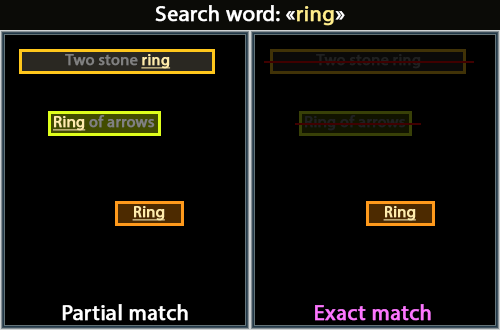
<style>
.page{position:relative;width:500px;height:330px;background:#000000}
.page>*{position:absolute;margin:0}
.t1{font:22px "MyriadPro-Regular";color:#ffffff;font-weight:bold}
.t2{font:22px "MyriadPro-Regular";color:#ffed8b;font-weight:bold}
.t3{font:16px "MyriadPro-Regular";color:#808080;font-weight:bold}
.t4{font:16px "MyriadPro-Regular";color:#ffecab;font-weight:bold;text-decoration:underline}
.t5{font:16px "MyriadPro-Regular";color:#202020;font-weight:bold}
.t6{font:22px "MyriadPro-Regular";color:#fd76ff;font-weight:bold}
</style>
<div class="page">
<p class="t1" style="left:155px;top:5px;width:190px;height:21px">Search word: «<span class="t2">ring</span>»</p>
<p class="t3" style="left:65px;top:54px;width:106px;height:15px">Two stone <span class="t4">ring</span></p>
<p class="t5" style="left:316px;top:54px;width:105px;height:15px">Two stone ring</p>
<p class="t3" style="left:53px;top:115px;width:102px;height:16px"><span class="t4">Ring</span> of arrows</p>
<p class="t5" style="left:305px;top:115px;width:101px;height:16px">Ring of arrows</p>
<p class="t4" style="left:132px;top:206px;width:33px;height:15px">Ring</p>
<p class="t4" style="left:383px;top:206px;width:33px;height:15px">Ring</p>
<p class="t1" style="left:62px;top:304px;width:126px;height:17px">Partial match</p>
<p class="t6" style="left:315px;top:304px;width:116px;height:17px">Exact match</p>
</div>
